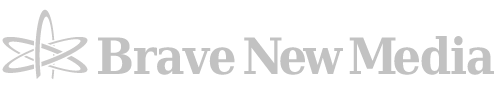
<style>
.page{position:relative;width:498px;height:90px;background:#ffffff}
.page>*{position:absolute;margin:0}
.t1{font:50px "DejaVuSerifCondensed-Bold";letter-spacing:-0.025em;color:#c2c2c2}
.t2{font:50px "DejaVuSerifCondensed-Bold";letter-spacing:-0.1em;color:#c2c2c2}
.t3{font:50px "DejaVuSerifCondensed-Bold";letter-spacing:-0.075em;color:#c2c2c2}
</style>
<div class="page">
<p class="t1" style="left:98px;top:36px;width:396px;height:39px">Brav<span class="t2">e N</span><span class="t3">e</span><span class="t2">w M</span>edia</p>
</div>
